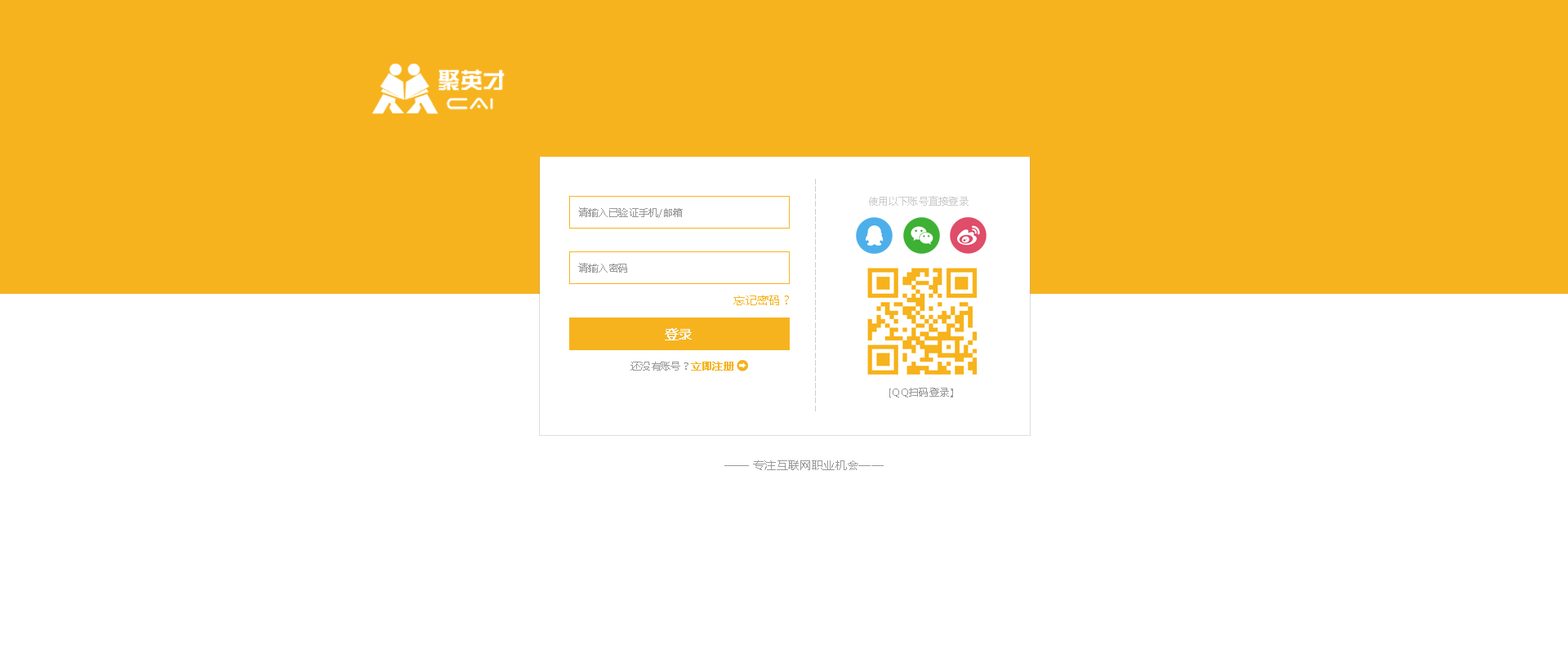
<style>
.page{position:relative;width:1568px;height:653px;background:#ffffff}
.page>*{position:absolute;margin:0}
.t1{font:9.8px "MicrosoftYaHei";letter-spacing:0.025em;color:#cfcccc}
.t2{font:9.8px "MicrosoftYaHei";letter-spacing:0.025em;color:#999999}
.t3{font:11.4px "MicrosoftYaHei";letter-spacing:0.025em;color:#f7b31e}
.t4{font:13.1px "MicrosoftYaHei";letter-spacing:0.025em;color:#fcfbf8;font-weight:bold}
.t5{font:9.8px "MicrosoftYaHei";letter-spacing:0.025em;color:#f7b31e;font-weight:bold}
.t6{font:11.4px "MicrosoftYaHei";letter-spacing:0.025em;color:#999999}
</style>
<div class="page">
<p class="t1" style="left:869px;top:196px;width:100px;height:10px">使用以下账号直接登录</p>
<p class="t2" style="left:578px;top:207px;width:105px;height:11px">请输入已验证手机/邮箱</p>
<p class="t2" style="left:578px;top:263px;width:49px;height:10px">请输入密码</p>
<p class="t3" style="left:733px;top:296px;width:56px;height:9px">忘记密码？</p>
<p class="t4" style="left:665px;top:328px;width:27px;height:13px">登录</p>
<p class="t2" style="left:630px;top:362px;width:104px;height:9px">还没有账号？<span class="t5">立即注册</span></p>
<p class="t2" style="left:889px;top:388px;width:64px;height:10px">[QQ扫码登录】</p>
<p class="t6" style="left:724px;top:461px;width:160px;height:9px">—— 专注互联网职业机会——</p>
</div>
